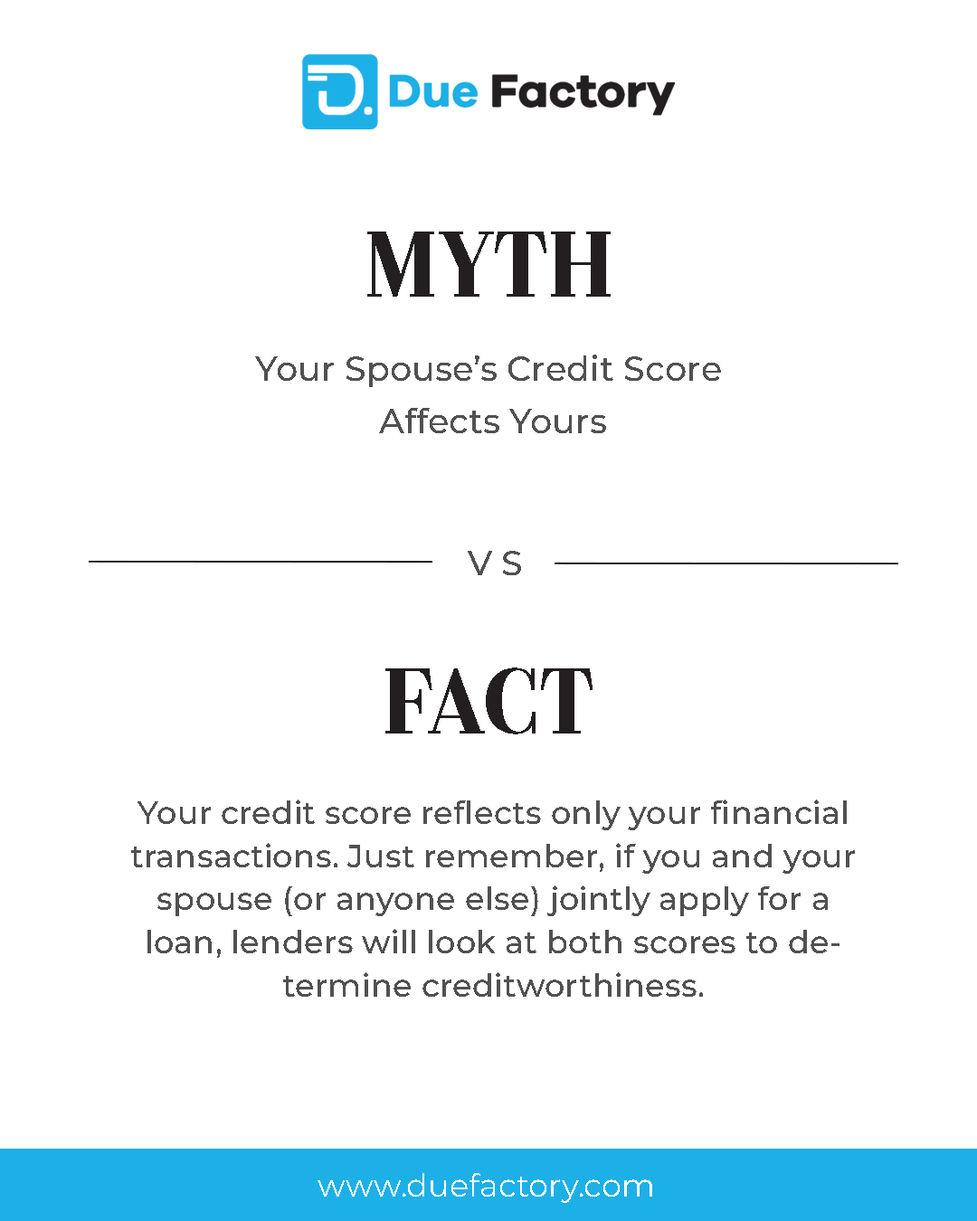
<style>
.page{position:relative;width:977px;height:1221px;background:#ffffff}
.page>*{position:absolute;margin:0}
.t1{font:81px "Couturier-SemiBold";color:#231f20}
.t2{font:33.9px/52.9px "Montserrat-Medium";color:#515151}
.t3{font:33.9px "Montserrat-Medium";color:#515151}
.t4{font:32px/43.1px "Montserrat-Medium";color:#515151}
.t5{font:32px "Montserrat-Regular";color:#ffffff}
</style>
<div class="page">
<p class="t1" style="left:367px;top:232px;width:243px;height:65px">MYTH</p>
<p class="t2" style="left:255px;top:355px;width:466px;height:78px;text-align:center">Your Spouse’s Credit Score <br>Affects Yours</p>
<p class="t3" style="left:468px;top:551px;width:53px;height:24px">V S</p>
<p class="t1" style="left:385px;top:667px;width:207px;height:67px">FACT</p>
<p class="t4" style="left:131px;top:799px;width:724px;height:198px;text-align:center">Your credit score reflects only your financial transactions. Just remember, if you and your spouse (or anyone else) jointly apply for a loan, lenders will look at both scores to determine creditworthiness.</p>
<p class="t5" style="left:317px;top:1173px;width:335px;height:30px">www.duefactory.com</p>
</div>
